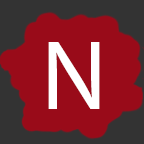
<style>
.page{position:relative;width:144px;height:144px;background:#990b19}
.page>*{position:absolute;margin:0}
.t1{font:100px "MyriadPro-Regular";color:#ffffff}
</style>
<div class="page">
<p class="t1" style="left:48px;top:42px;width:52px;height:67px">N</p>
</div>
